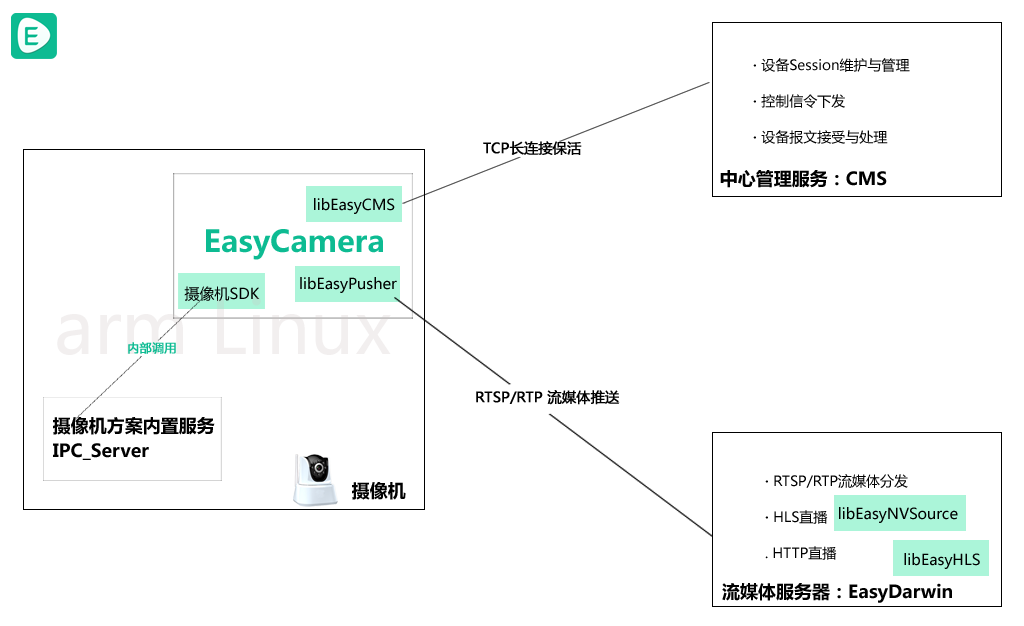
<style>
.page{position:relative;width:1024px;height:626px;background:#ffffff}
.page>*{position:absolute;margin:0}
.t1{font:14px/36px "MicrosoftYaHei";color:#000000}
.t2{font:14px/36px "MicrosoftYaHei";color:#000000;font-weight:bold}
.t3{font:14px "MicrosoftYaHei";color:#000000;font-weight:bold}
.t4{font:18px "MicrosoftYaHei-Bold";color:#000000}
.t5{font:15px "MicrosoftYaHei";color:#000000}
.t6{font:30px "MicrosoftYaHei-Bold";color:#0dbb92}
.t7{font:12px "MicrosoftYaHei";color:#0dbb92;font-weight:bold}
.t8{font:18px/24.6px "MicrosoftYaHei-Bold";color:#000000}
</style>
<div class="page">
<p class="t1" style="left:753px;top:58px;width:157px;height:86px"><span class="t2">· </span>设备Session维护与管理<br><span class="t2">· </span>控制信令下发<br><span class="t2">· </span>设备报文接受与处理</p>
<p class="t3" style="left:483px;top:141px;width:99px;height:14px">TCP长连接保活</p>
<p class="t4" style="left:720px;top:170px;width:167px;height:18px">中心管理服务：CMS</p>
<p class="t5" style="left:314px;top:198px;width:81px;height:16px">libEasyCMS</p>
<p class="t6" style="left:206px;top:229px;width:177px;height:31px">EasyCamera</p>
<p class="t5" style="left:300px;top:277px;width:97px;height:16px">libEasyPusher</p>
<p class="t5" style="left:184px;top:286px;width:76px;height:16px">摄像机SDK</p>
<p class="t7" style="left:128px;top:342px;width:48px;height:12px">内部调用</p>
<p class="t3" style="left:476px;top:390px;width:144px;height:15px">RTSP/RTP 流媒体推送</p>
<p class="t8" style="left:53px;top:417px;width:162px;height:43px">摄像机方案内置服务<br>IPC_Server</p>
<p class="t4" style="left:352px;top:482px;width:54px;height:18px">摄像机</p>
<p class="t1" style="left:765px;top:474px;width:143px;height:86px"><span class="t2">· </span>RTSP/RTP流媒体分发 <br><span class="t2">· </span>HLS直播<br>. HTTP直播</p>
<p class="t5" style="left:839px;top:507px;width:119px;height:16px">libEasyNVSource</p>
<p class="t5" style="left:904px;top:553px;width:76px;height:16px">libEasyHLS</p>
<p class="t4" style="left:722px;top:583px;width:230px;height:20px">流媒体服务器：EasyDarwin</p>
</div>
